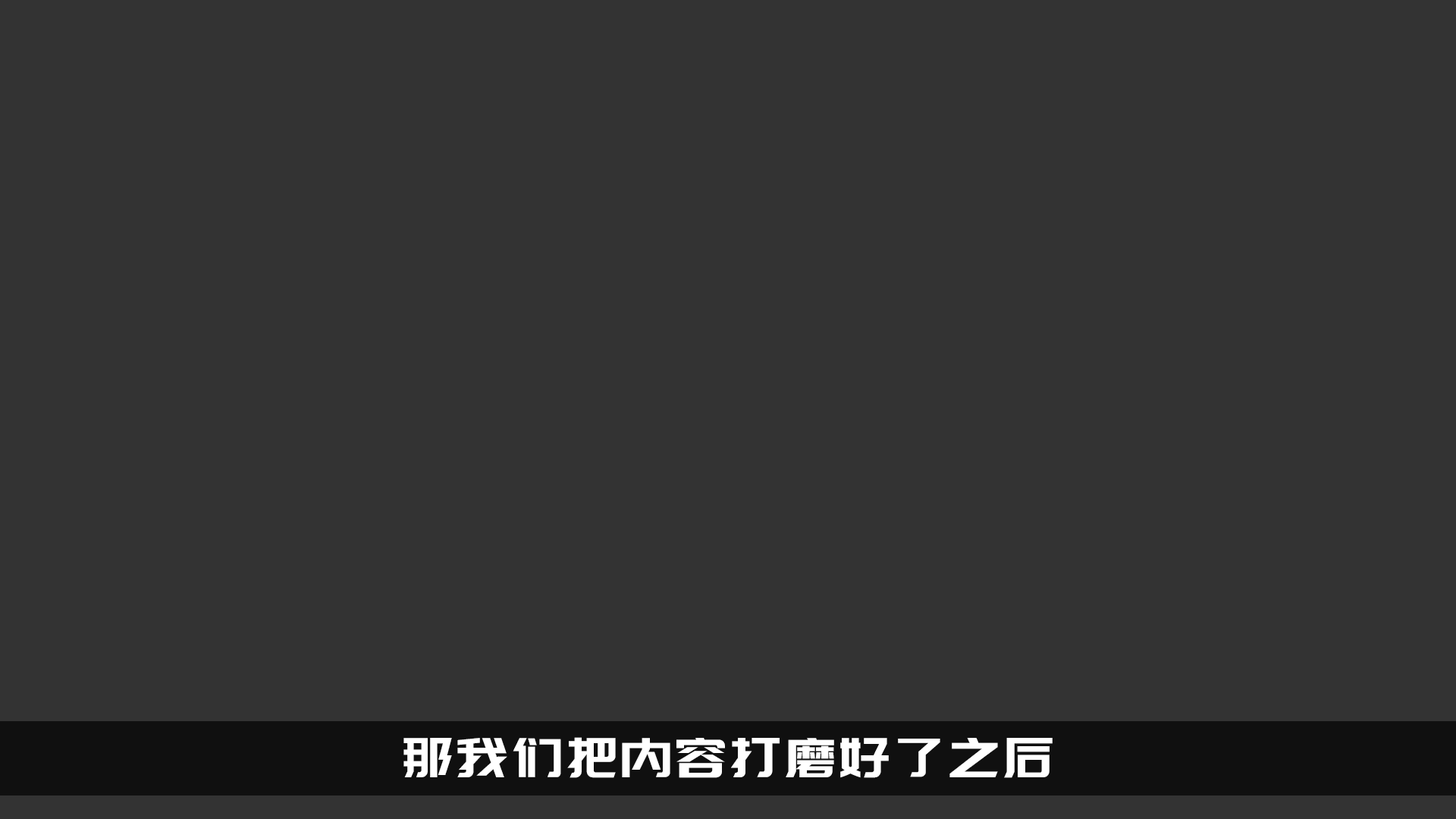
<style>
.page{position:relative;width:1456px;height:819px;background:#333333}
.page>*{position:absolute;margin:0}
.t1{font:54.6px "PangMenZhengDao-3";color:#ffffff}
</style>
<div class="page">
<p class="t1" style="left:403px;top:737px;width:650px;height:41px">那我们把内容打磨好了之后</p>
</div>
